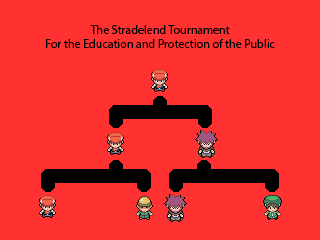
<style>
.page{position:relative;width:320px;height:240px;background:#ff3131}
.page>*{position:absolute;margin:0}
.t1{font:12px "MyriadPro-Regular";color:#000000}
</style>
<div class="page">
<p class="t1" style="left:46px;top:25px;width:229px;height:23px;text-align:center">The Stradelend Tournament<br>For the Education and Protection of the Public</p>
</div>
